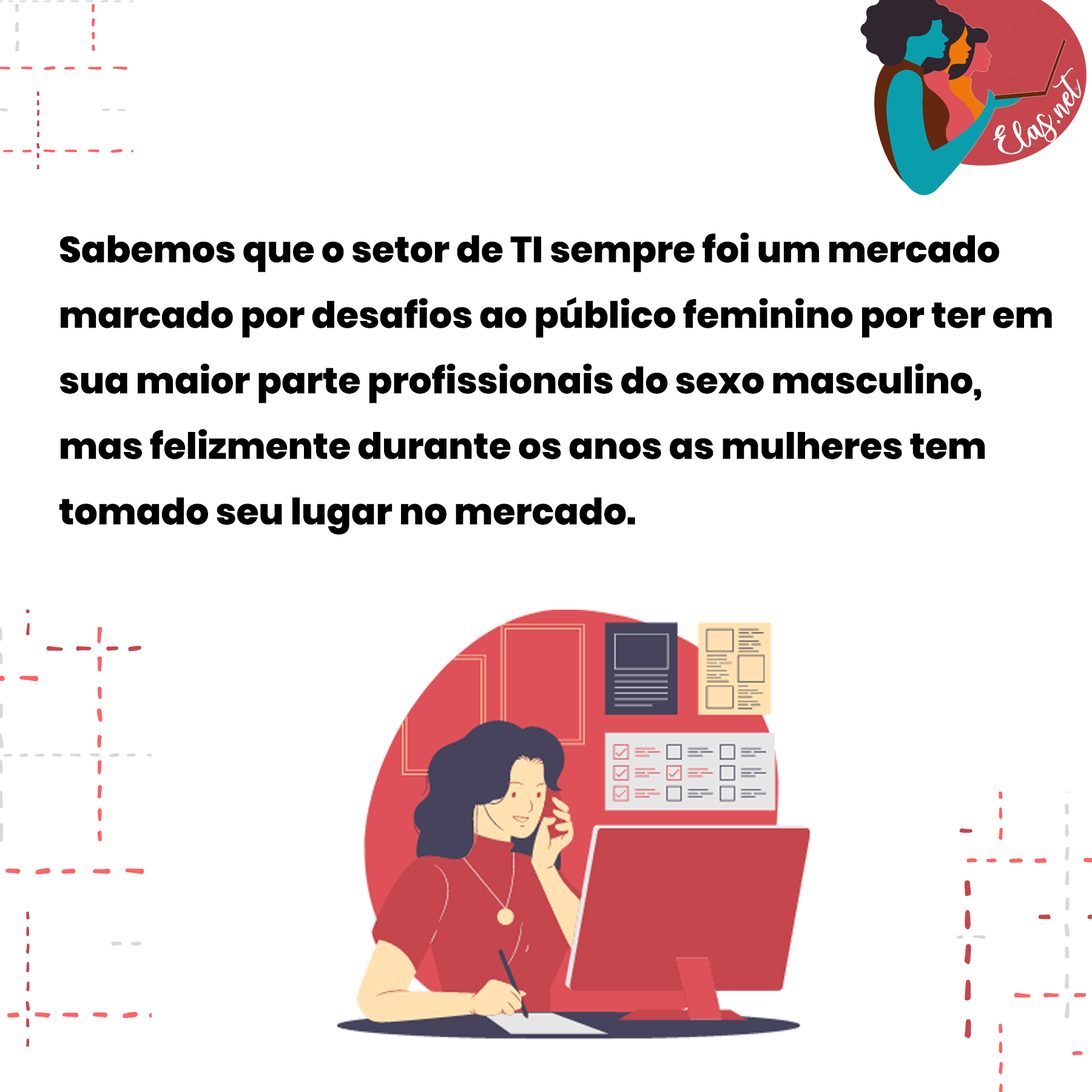
<style>
.page{position:relative;width:1092px;height:1092px;background:#ffffff}
.page>*{position:absolute;margin:0}
.t1{font:25px "charlinda-Regular";color:#ffffff;scale:1.18 1}
.t2{font:36.4px/65.5px "Poppins-ExtraBold";color:#000000}
</style>
<div class="page">
<p class="t1" style="left:993px;top:67px;width:88px;height:88px;rotate:-42deg">Elas.net</p>
<p class="t2" style="left:59px;top:232px;width:993px;height:302px">Sabemos que o setor de TI sempre foi um mercado marcado por desafios ao público feminino por ter em sua maior parte profissionais do sexo masculino, mas felizmente durante os anos as mulheres tem tomado seu lugar no mercado.<br>A notícia em questão aborda justamente esse crescimento das mulheres no mercado<br>de TI, <br>de T</p>
</div>
